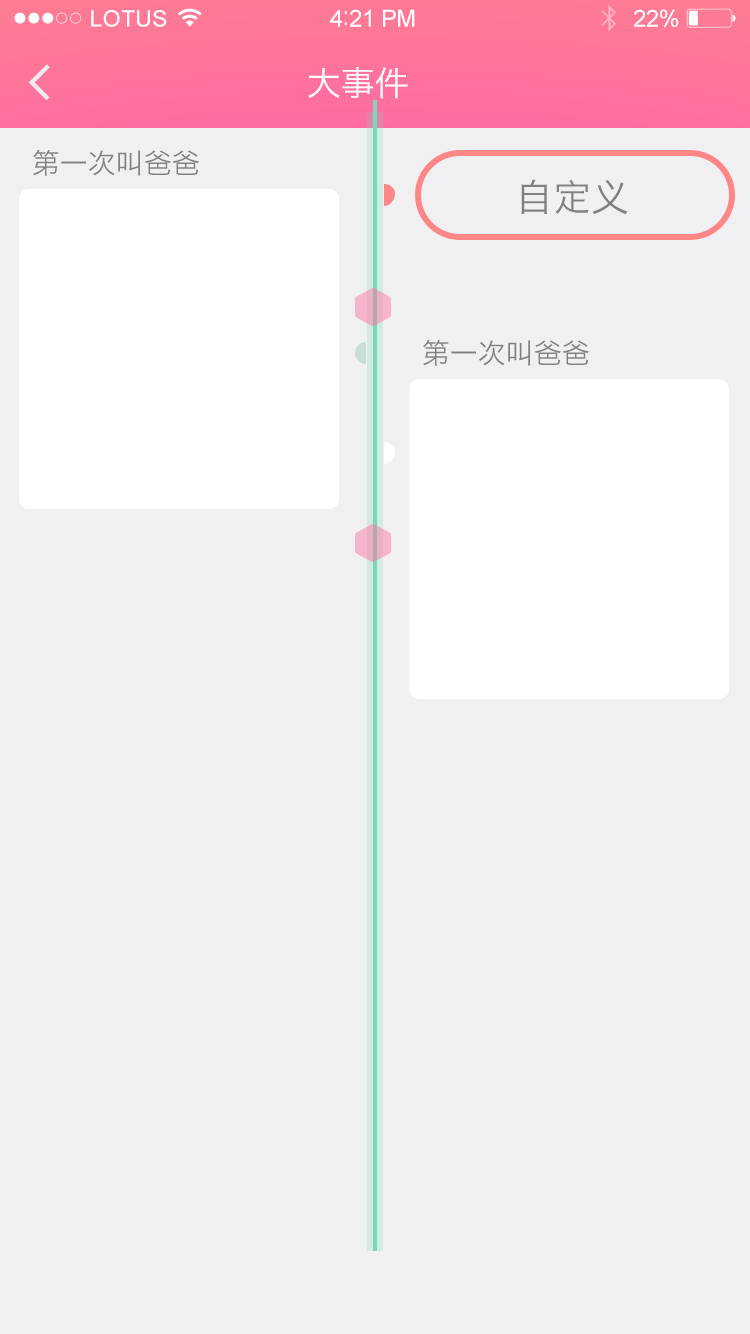
<style>
.page{position:relative;width:750px;height:1334px;background:#f0f0f2}
.page>*{position:absolute;margin:0}
.t1{font:22.6px "ArialMT";letter-spacing:0.02em;color:#ffffff}
.t2{font:23.6px "ArialMT";letter-spacing:-0.02em;color:#ffffff}
.t3{font:25.6px "ArialMT";letter-spacing:-0.02em;color:#ffffff}
.t4{font:34px "HiraginoSansGB-W3";color:#ffffff}
.t5{font:28px "HiraginoSansGB-W3";color:#808080}
.t6{font:38px "HiraginoSansGB-W3";color:#808080}
</style>
<div class="page">
<p class="t1" style="left:91px;top:10px;width:76px;height:17px">LOTUS</p>
<p class="t2" style="left:330px;top:9px;width:85px;height:18px">4<span class="t3">:</span>21 PM</p>
<p class="t2" style="left:634px;top:9px;width:45px;height:18px">22%</p>
<p class="t4" style="left:308px;top:67px;width:100px;height:32px">大事件</p>
<p class="t5" style="left:33px;top:149px;width:166px;height:27px">第一次叫爸爸</p>
<p class="t6" style="left:521px;top:179px;width:107px;height:36px">自定义</p>
<p class="t5" style="left:423px;top:339px;width:166px;height:27px">第一次叫爸爸</p>
</div>
